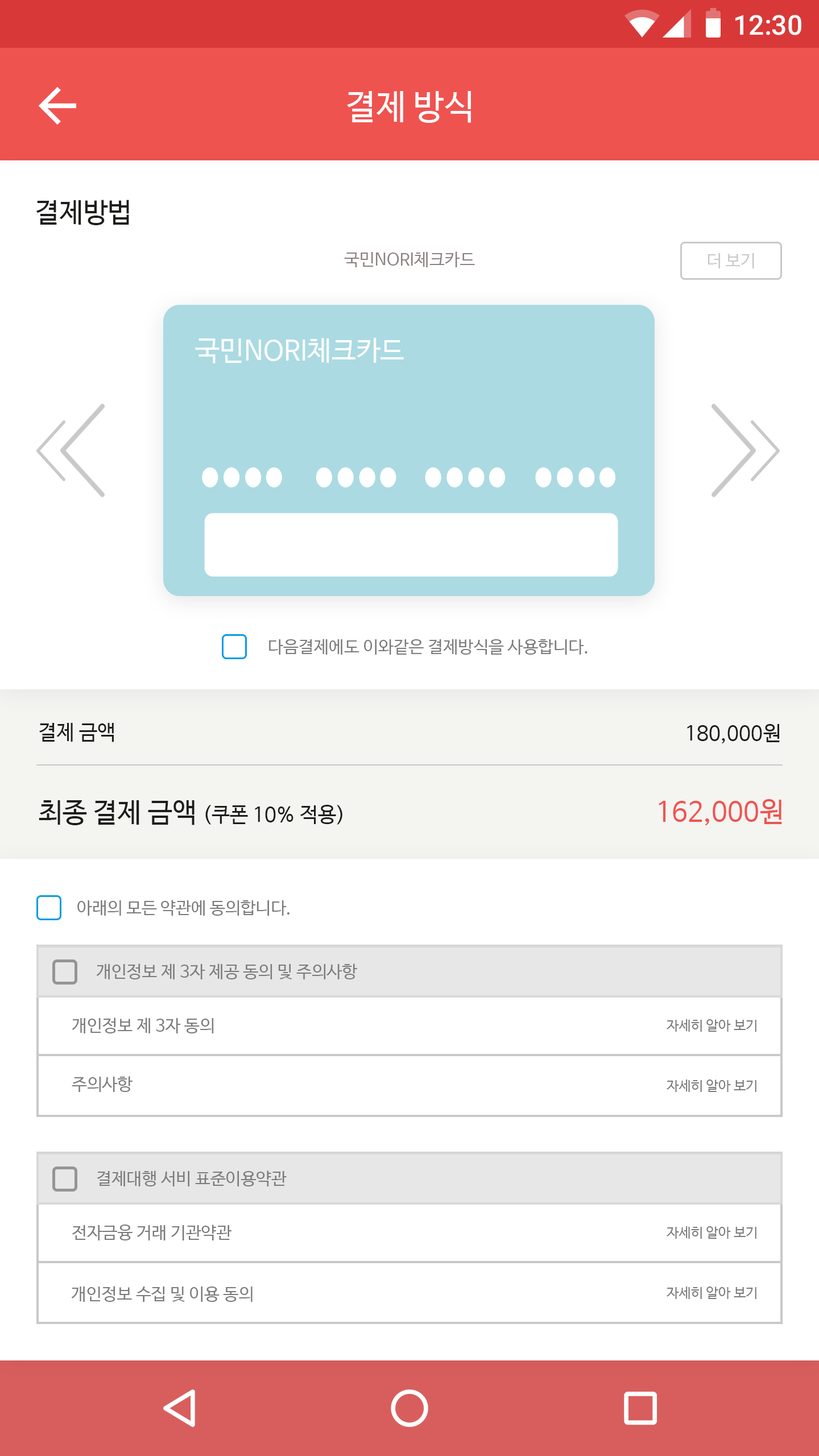
<style>
.page{position:relative;width:819px;height:1456px;background:#ffffff}
.page>*{position:absolute;margin:0}
.t1{font:27.3px "Roboto-Medium";color:#ffffff}
.t2{font:34.1px "NanumBarunGothic";color:#ffffff}
.t3{font:27.3px "NanumBarunGothic";color:#1d1d1b}
.t4{font:17.1px "NanumBarunGothic";color:#8e8181}
.t5{font:16.9px "NanumBarunGothic";color:#c9c9c9}
.t6{font:27.3px "NanumBarunGothic";color:#fefefe}
.t7{font:17.1px "NanumBarunGothic";color:#7b7b7b}
.t8{font:20.5px "NanumBarunGothic";color:#1d1d1b}
.t9{font:27.3px "NanumBarunGothic";color:#ef5350}
.t10{font:13.6px "NanumBarunGothic";color:#7b7b7b}
</style>
<div class="page">
<p class="t1" style="left:735px;top:15px;width:66px;height:20px">12:30</p>
<p class="t2" style="left:347px;top:91px;width:124px;height:32px">결제 방식</p>
<p class="t3" style="left:36px;top:200px;width:93px;height:25px">결제방법</p>
<p class="t4" style="left:344px;top:251px;width:131px;height:16px">국민NORI체크카드</p>
<p class="t5" style="left:708px;top:253px;width:46px;height:15px">더 보기</p>
<p class="t6" style="left:195px;top:338px;width:209px;height:25px">국민NORI체크카드</p>
<p class="t7" style="left:269px;top:639px;width:319px;height:16px">다음결제에도 이와같은 결제방식을 사용합니다.</p>
<p class="t8" style="left:39px;top:723px;width:75px;height:19px">결제 금액</p>
<p class="t8" style="left:687px;top:724px;width:93px;height:19px">180,000원</p>
<p class="t8" style="left:39px;top:800px;width:303px;height:25px"><span class="t3">최종 결제 금액 </span>(쿠폰 10% 적용)</p>
<p class="t9" style="left:659px;top:799px;width:123px;height:27px">162,000원</p>
<p class="t7" style="left:77px;top:900px;width:212px;height:16px">아래의 모든 약관에 동의합니다.</p>
<p class="t7" style="left:96px;top:963px;width:261px;height:16px">개인정보 제 3자 제공 동의 및 주의사항</p>
<p class="t7" style="left:72px;top:1017px;width:142px;height:16px">개인정보 제 3자 동의</p>
<p class="t10" style="left:667px;top:1019px;width:89px;height:13px">자세히 알아 보기</p>
<p class="t7" style="left:72px;top:1076px;width:61px;height:16px">주의사항</p>
<p class="t10" style="left:667px;top:1079px;width:89px;height:13px">자세히 알아 보기</p>
<p class="t7" style="left:97px;top:1170px;width:190px;height:16px">결제대행 서비 표준이용약관</p>
<p class="t7" style="left:72px;top:1225px;width:159px;height:15px">전자금융 거래 기관약관</p>
<p class="t10" style="left:667px;top:1226px;width:89px;height:13px">자세히 알아 보기</p>
<p class="t7" style="left:71px;top:1286px;width:182px;height:16px">개인정보 수집 및 이용 동의</p>
<p class="t10" style="left:667px;top:1286px;width:89px;height:13px">자세히 알아 보기</p>
</div>
